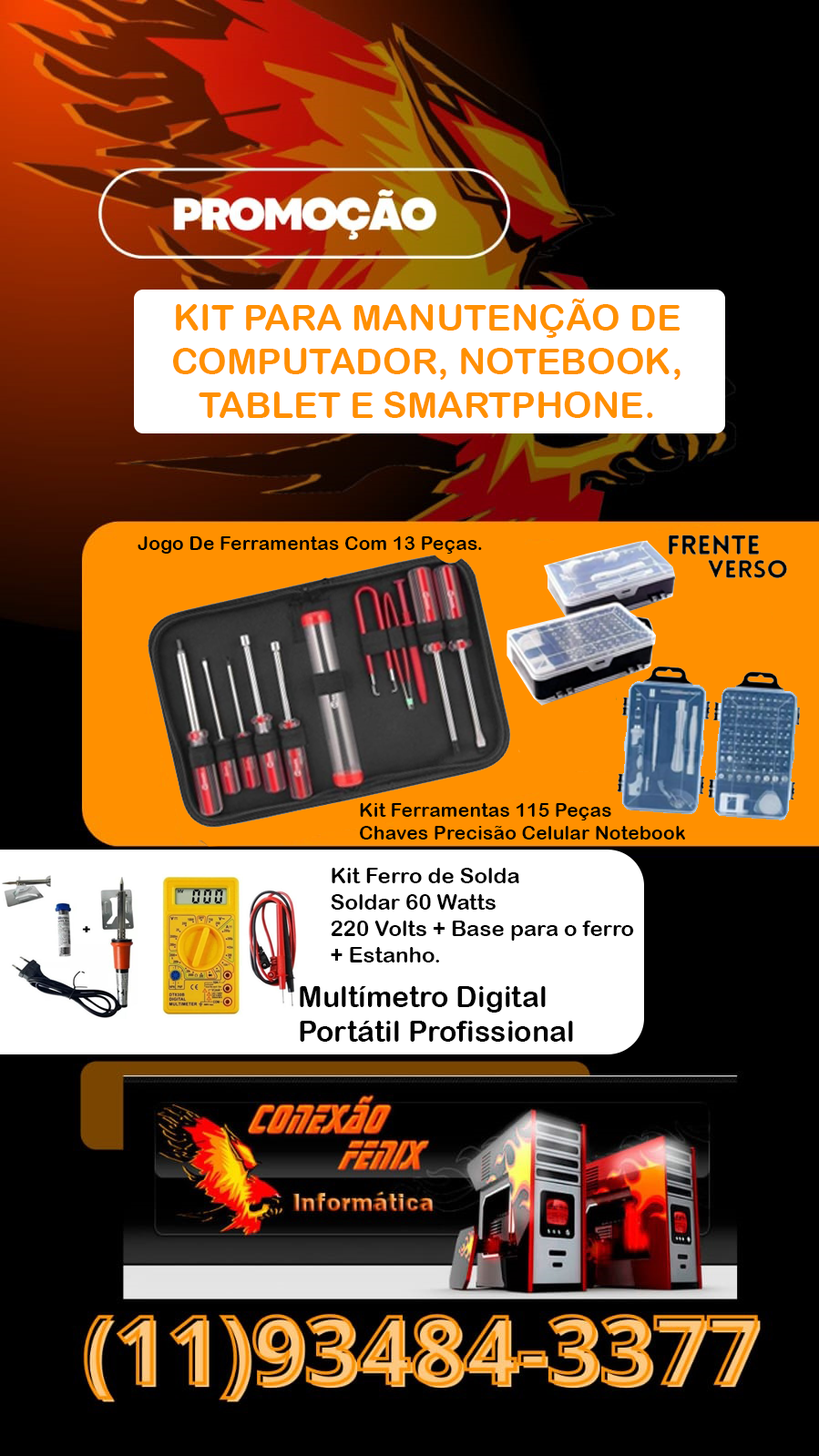
<style>
.page{position:relative;width:819px;height:1456px;background:#000000}
.page>*{position:absolute;margin:0}
.t1{font:36.4px "ArialRoundedMTBold";color:#ff9000}
.t2{font:19.4px "ArialRoundedMTBold";color:#000000}
.t3{font:21.9px "ArialRoundedMTBold";color:#000000}
.t4{font:29.1px "ArialRoundedMTBold";color:#000000}
</style>
<div class="page">
<p class="t1" style="left:173px;top:298px;width:507px;height:120px;text-align:center">KIT PARA MANUTENÇÃO DE <br>COMPUTADOR, NOTEBOOK,<br>TABLET E SMARTPHONE.</p>
<p class="t2" style="left:138px;top:536px;width:344px;height:18px">Jogo De Ferramentas Com 13 Peças.</p>
<p class="t2" style="left:360px;top:803px;width:325px;height:37px">Kit Ferramentas 115 Peças <br>Chaves Precisão Celular Notebook</p>
<p class="t3" style="left:331px;top:868px;width:303px;height:95px">Kit Ferro de Solda<br>Soldar 60 Watts<br>220 Volts + Base para o ferro <br>+ Estanho.</p>
<p class="t4" style="left:300px;top:986px;width:273px;height:56px">Multímetro Digital <br>Portátil Profissional</p>
</div>
